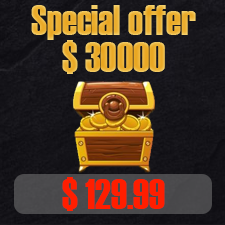
<style>
.page{position:relative;width:225px;height:225px}
.page>*{position:absolute;margin:0}
.t1{font:41.7px "Haettenschweiler";color:#ecb237}
.t2{font:41.7px "Haettenschweiler";color:#ebaf32}
.t3{font:41.7px "Haettenschweiler";color:#ff1e00}
</style>
<div class="page">
<p class="t1" style="left:31px;top:5px;width:165px;height:35px">Special offer</p>
<p class="t2" style="left:62px;top:40px;width:103px;height:34px">$ 30000</p>
<p class="t3" style="left:62px;top:177px;width:103px;height:34px">$ 129.99</p>
</div>
